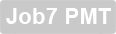
<style>
.page{position:relative;width:116px;height:34px;background:#c9c9c9}
.page>*{position:absolute;margin:0}
.t1{font:22.1px "Arial-BoldMT";color:#ffffff}
</style>
<div class="page">
<p class="t1" style="left:6px;top:8px;width:105px;height:16px">Job7 PMT</p>
</div>
